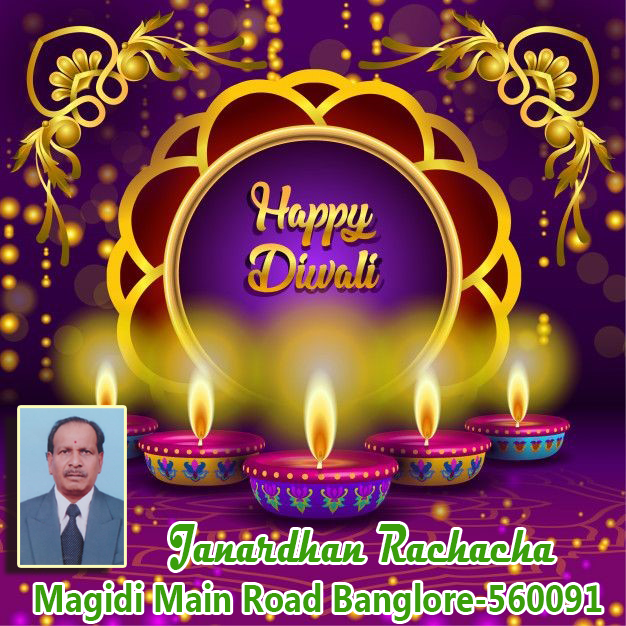
<style>
.page{position:relative;width:626px;height:626px}
.page>*{position:absolute;margin:0}
.t1{font:54.9px "Magneto-Bold";color:#3a9e0a;scale:0.61 1}
.t2{font:38.2px "MicrosoftNewTaiLue-Bold";color:#3a9e0a;scale:0.88 1}
</style>
<div class="page">
<p class="t1" style="left:170px;top:524px;width:385px;height:46px">Janardhan Rachacha</p>
<p class="t2" style="left:35px;top:583px;width:567px;height:38px">Magidi Main Road Banglore-560091</p>
</div>
